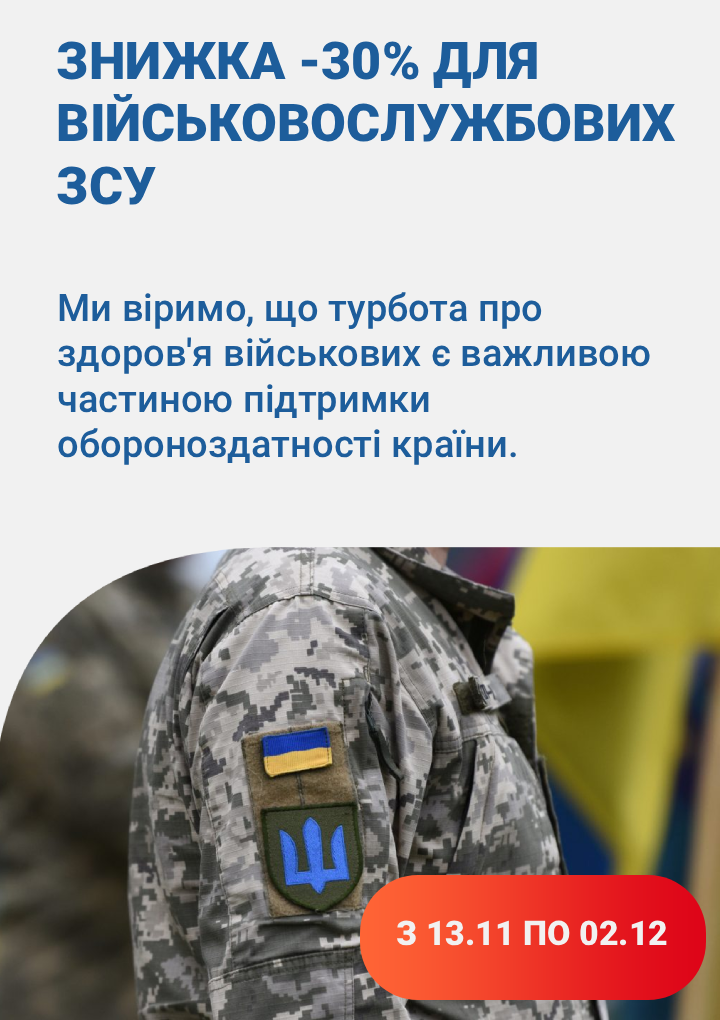
<style>
.page{position:relative;width:720px;height:1020px;background:#f1f1f1}
.page>*{position:absolute;margin:0}
.t1{font:52px "Roboto-Black";color:#1d5d9b}
.t2{font:38px "Roboto-Medium";color:#1d5d9b}
.t3{font:34px "Roboto-Black";color:#f1f1f1}
</style>
<div class="page">
<p class="t1" style="left:57px;top:41px;width:619px;height:164px">ЗНИЖКА -30% ДЛЯ ВІЙСЬКОВОСЛУЖБОВИХ ЗСУ</p>
<p class="t2" style="left:58px;top:292px;width:592px;height:173px">Ми віримо, що турбота про здоров'я військових є важливою частиною підтримки обороноздатності країни.</p>
<p class="t3" style="left:397px;top:920px;width:270px;height:26px">З 13.11 ПО 02.12</p>
</div>
